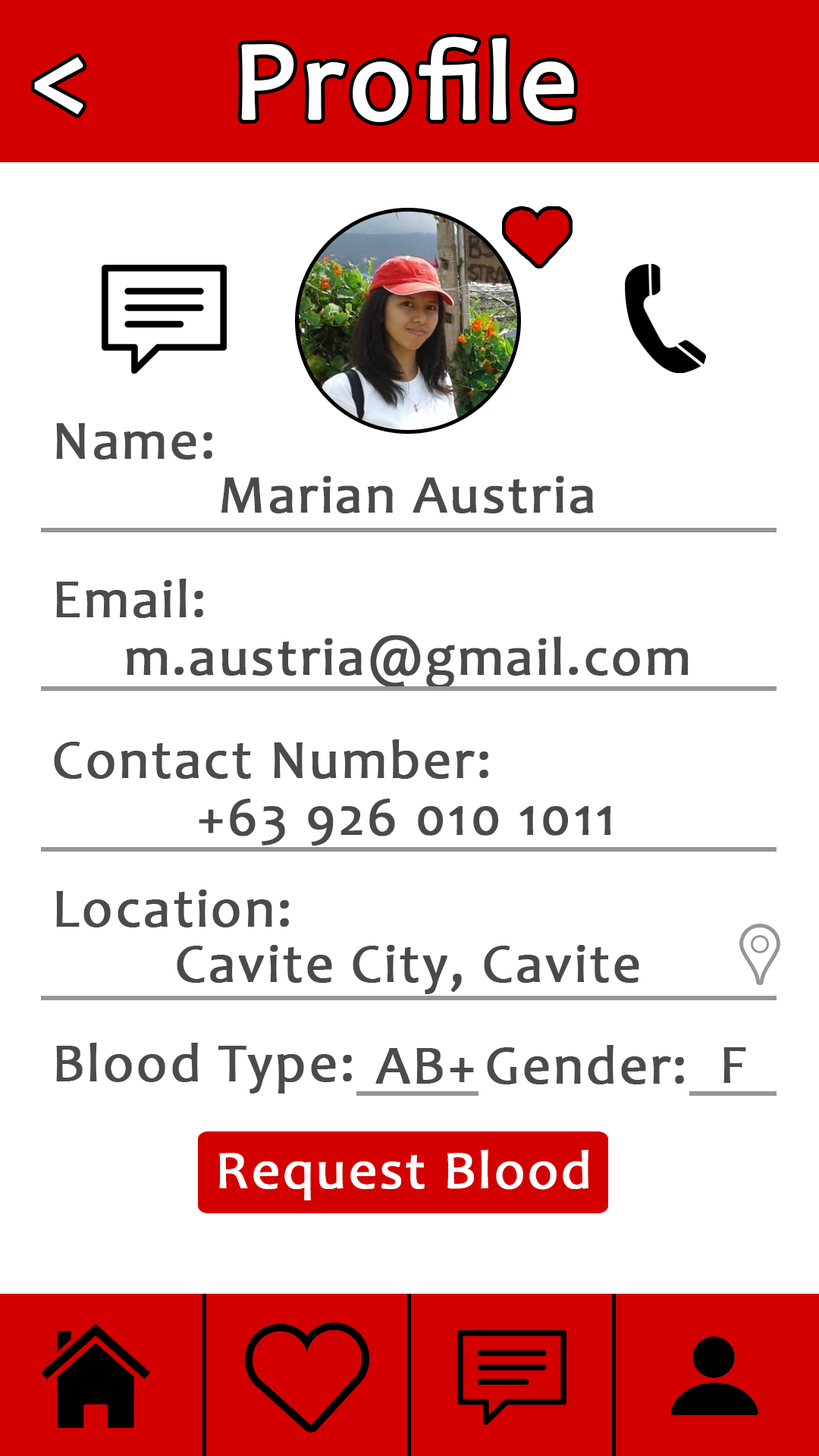
<style>
.page{position:relative;width:819px;height:1456px;background:#ffffff}
.page>*{position:absolute;margin:0}
.t1{font:113.4px "Candara";letter-spacing:0.03em;color:#ffffff;font-weight:bold}
.t2{font:113.7px "Candara";letter-spacing:0.03em;color:#ffffff;font-weight:bold}
.t3{font:54.6px "Candara";letter-spacing:0.03em;color:#4b4b4b;font-weight:bold}
.t4{font:54.3px "Candara";letter-spacing:0.03em;color:#4a4a4a;font-weight:bold}
.t5{font:54.6px "Candara";letter-spacing:0.03em;color:#4a4a4a;font-weight:bold}
.t6{font:54.3px "Candara";letter-spacing:0.03em;color:#ffffff;font-weight:bold}
</style>
<div class="page">
<p class="t1" style="left:241px;top:36px;width:333px;height:86px">Profile</p>
<p class="t2" style="left:34px;top:57px;width:49px;height:58px">&lt;</p>
<p class="t3" style="left:56px;top:423px;width:156px;height:37px">Name:</p>
<p class="t4" style="left:221px;top:475px;width:373px;height:38px">Marian Austria</p>
<p class="t3" style="left:56px;top:579px;width:147px;height:39px">Email:</p>
<p class="t4" style="left:126px;top:635px;width:563px;height:54px">m.austria@gmail.com</p>
<p class="t3" style="left:54px;top:739px;width:434px;height:40px">Contact Number:</p>
<p class="t4" style="left:199px;top:799px;width:411px;height:47px">+63 926 010 1011</p>
<p class="t3" style="left:56px;top:890px;width:233px;height:37px">Location:</p>
<p class="t5" style="left:177px;top:945px;width:462px;height:49px">Cavite City, Cavite</p>
<p class="t3" style="left:56px;top:1043px;width:296px;height:51px">Blood Type:</p>
<p class="t3" style="left:375px;top:1048px;width:99px;height:36px">AB+</p>
<p class="t3" style="left:487px;top:1045px;width:197px;height:39px">Gender:</p>
<p class="t3" style="left:723px;top:1047px;width:23px;height:36px">F</p>
<p class="t6" style="left:219px;top:1150px;width:369px;height:50px">Request Blood</p>
</div>
